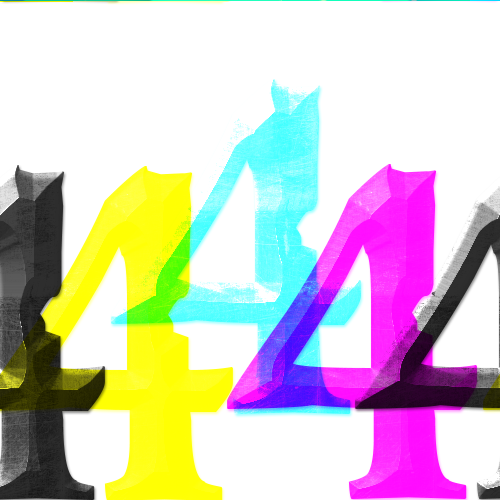
<style>
.page{position:relative;width:500px;height:500px;background:#ffffff}
.page>*{position:absolute;margin:0}
.t1{font:500px "PiecesofEight"}
</style>
<div class="page">
<p class="t1" style="left:111px;top:78px;width:250px;height:335px">4</p>
</div>
